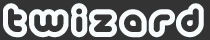
<style>
.page{position:relative;width:210px;height:40px;background:#333333}
.page>*{position:absolute;margin:0}
.t1{font:45px "PicoWhiteAl";color:#f9fcfd}
</style>
<div class="page">
<p class="t1" style="left:3px;top:3px;width:201px;height:35px">TWIZARD</p>
</div>
